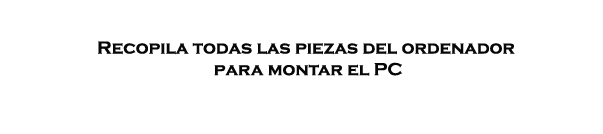
<style>
.page{position:relative;width:603px;height:134px;background:#ffffff}
.page>*{position:absolute;margin:0}
.t1{font:18px "CopperplateGothic-Bold";color:#060707}
</style>
<div class="page">
<p class="t1" style="left:98px;top:41px;width:417px;height:35px;text-align:center">Recopila todas las piezas del ordenador <br>para montar el PC</p>
</div>
